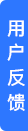
<style>
.page{position:relative;width:28px;height:131px;background:#2d77ff}
.page>*{position:absolute;margin:0}
.t1{font:18.6px "PingFangSC-Medium";color:#ffffff}
</style>
<div class="page">
<p class="t1" style="left:7px;top:20px;width:18px;height:91px">用 户 反 馈</p>
</div>
